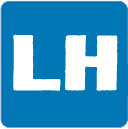
<style>
.page{position:relative;width:128px;height:129px;background:#0177b5}
.page>*{position:absolute;margin:0}
.t1{font:73px "FetteSteinschrift";color:#ffffff}
</style>
<div class="page">
<p class="t1" style="left:13px;top:34px;width:105px;height:57px">LH</p>
</div>
